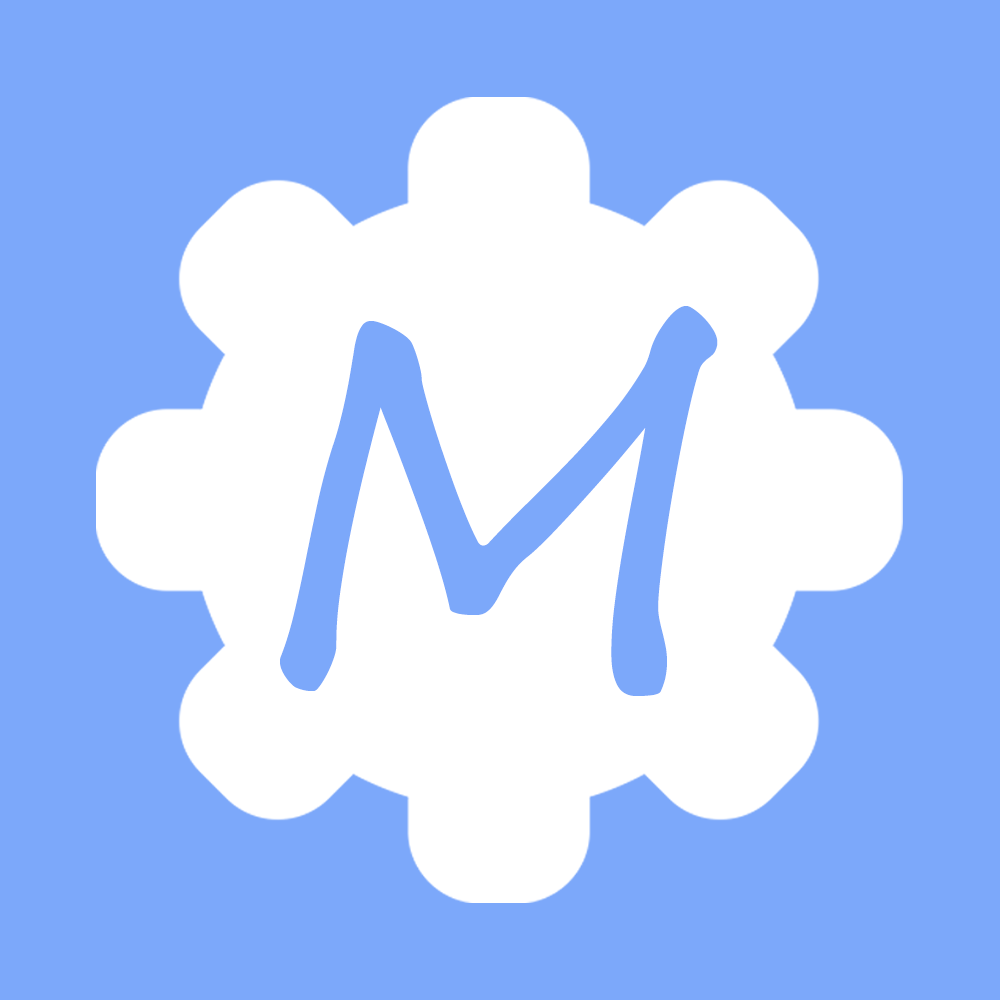
<style>
.page{position:relative;width:1000px;height:1000px;background:#7ca8fa}
.page>*{position:absolute;margin:0}
.t1{font:505.6px "SegoeScript";color:#7ca8fa}
</style>
<div class="page">
<p class="t1" style="left:280px;top:306px;width:438px;height:390px">М</p>
</div>
